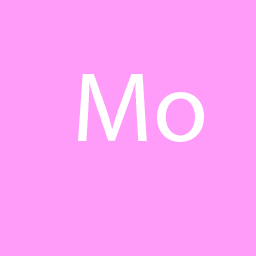
<style>
.page{position:relative;width:256px;height:256px;background:#ff9bf9}
.page>*{position:absolute;margin:0}
.t1{font:100px "MyriadPro-Regular";color:#ffffff}
</style>
<div class="page">
<p class="t1" style="left:78px;top:74px;width:126px;height:68px">Mo</p>
</div>
